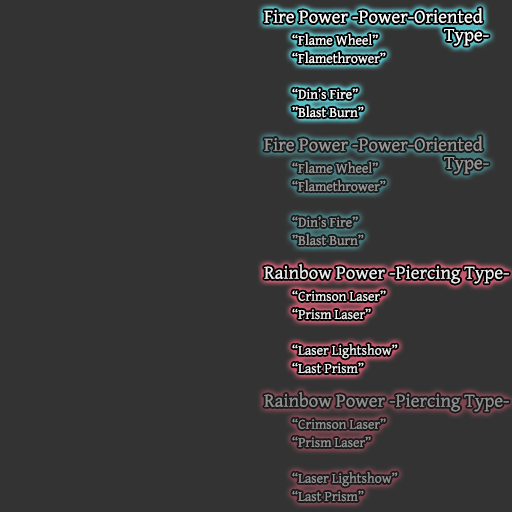
<style>
.page{position:relative;width:512px;height:512px;background:#333333}
.page>*{position:absolute;margin:0}
.t1{font:19px/18px "GentiumBasic";color:#ffffff}
.t2{font:14px/18px "GentiumBasic";color:#ffffff}
.t3{font:19px/18px "GentiumBasic";color:#9a9a9a}
.t4{font:14px/18px "GentiumBasic";color:#9a9a9a}
.t5{font:19px "GentiumBasic";color:#f0f0f0}
.t6{font:14px/18px "GentiumBasic";color:#f0f0f0}
.t7{font:19px "GentiumBasic";color:#929292}
.t8{font:14px/18px "GentiumBasic";color:#929292}
</style>
<div class="page">
<p class="t1" style="left:264px;top:8px;width:225px;height:38px">Fire Power -Power-Oriented<br>     Type-</p>
<p class="t2" style="left:292px;top:34px;width:94px;height:30px">“Flame Wheel”<br>“Flamethrower”</p>
<p class="t2" style="left:292px;top:88px;width:72px;height:30px">“Din’s Fire”<br>”Blast Burn”</p>
<p class="t3" style="left:264px;top:136px;width:225px;height:38px">Fire Power -Power-Oriented<br>     Type-</p>
<p class="t4" style="left:292px;top:162px;width:94px;height:30px">“Flame Wheel”<br>“Flamethrower”</p>
<p class="t4" style="left:292px;top:216px;width:72px;height:30px">“Din’s Fire”<br>”Blast Burn”</p>
<p class="t5" style="left:264px;top:264px;width:245px;height:20px">Rainbow Power -Piercing Type-</p>
<p class="t6" style="left:292px;top:290px;width:94px;height:30px">“Crimson Laser”<br>“Prism Laser”</p>
<p class="t6" style="left:292px;top:344px;width:106px;height:30px">“Laser Lightshow”<br>“Last Prism”</p>
<p class="t7" style="left:264px;top:392px;width:245px;height:20px">Rainbow Power -Piercing Type-</p>
<p class="t8" style="left:292px;top:418px;width:94px;height:30px">“Crimson Laser”<br>“Prism Laser”</p>
<p class="t8" style="left:292px;top:472px;width:106px;height:30px">“Laser Lightshow”<br>“Last Prism”</p>
</div>
